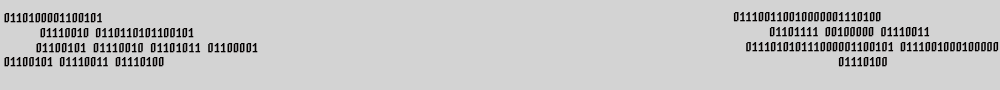
<style>
.page{position:relative;width:1000px;height:90px;background:#d3d3d3}
.page>*{position:absolute;margin:0}
.t1{font:12.5px "Terminal";letter-spacing:0.1em;color:#030000;font-weight:bold}
.t2{font:12.9px "Terminal";letter-spacing:0.1em;color:#030000;font-weight:bold}
.t3{font:16.7px "Terminal";letter-spacing:0.1em;color:#030000;font-weight:bold}
</style>
<div class="page">
<p class="t1" style="left:4px;top:13px;width:190px;height:25px">0110100001100101 <br> 01110010 0110110101100101</p>
<p class="t1" style="left:733px;top:12px;width:266px;height:55px">011100110010000001110100<br> 01101111 00100000 01110011<br>  011101010111000001100101 0111001000100000<br>                 01110100</p>
<p class="t2" style="left:36px;top:43px;width:222px;height:10px">01100101 01110010 01101011 01100001</p>
<p class="t1" style="left:4px;top:57px;width:160px;height:10px"><span class="t3"><br></span>01100101 01110011 01110100</p>
</div>
